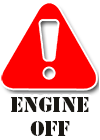
<style>
.page{position:relative;width:100px;height:140px;background:#ffffff}
.page>*{position:absolute;margin:0}
.t1{font:20px "StencilStd";color:#1a1814}
</style>
<div class="page">
<p class="t1" style="left:11px;top:97px;width:78px;height:39px;text-align:center">engine<br>off</p>
</div>
